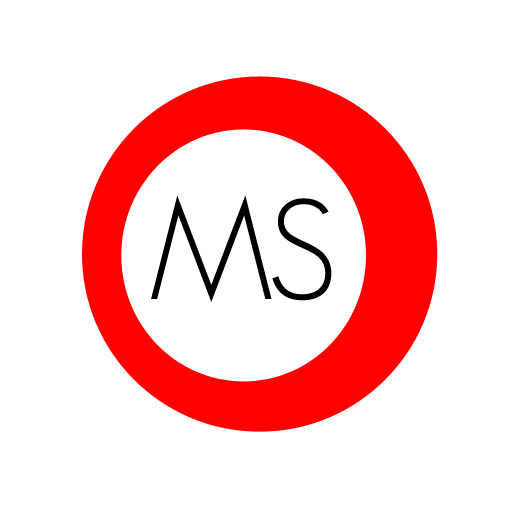
<style>
.page{position:relative;width:512px;height:512px;background:#ffffff}
.page>*{position:absolute;margin:0}
.t1{font:140px "GeosansLight";color:#000000}
</style>
<div class="page">
<p class="t1" style="left:151px;top:195px;width:181px;height:107px">MS</p>
</div>
